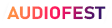
<style>
.page{position:relative;width:112px;height:28px;background:#ffffff}
.page>*{position:absolute;margin:0}
.t1{font:17.7px "Bahnschrift-Bold";scale:1.09 1}
</style>
<div class="page">
<p class="t1" style="left:7px;top:6px;width:99px;height:14px">AUDIOFEST</p>
</div>
